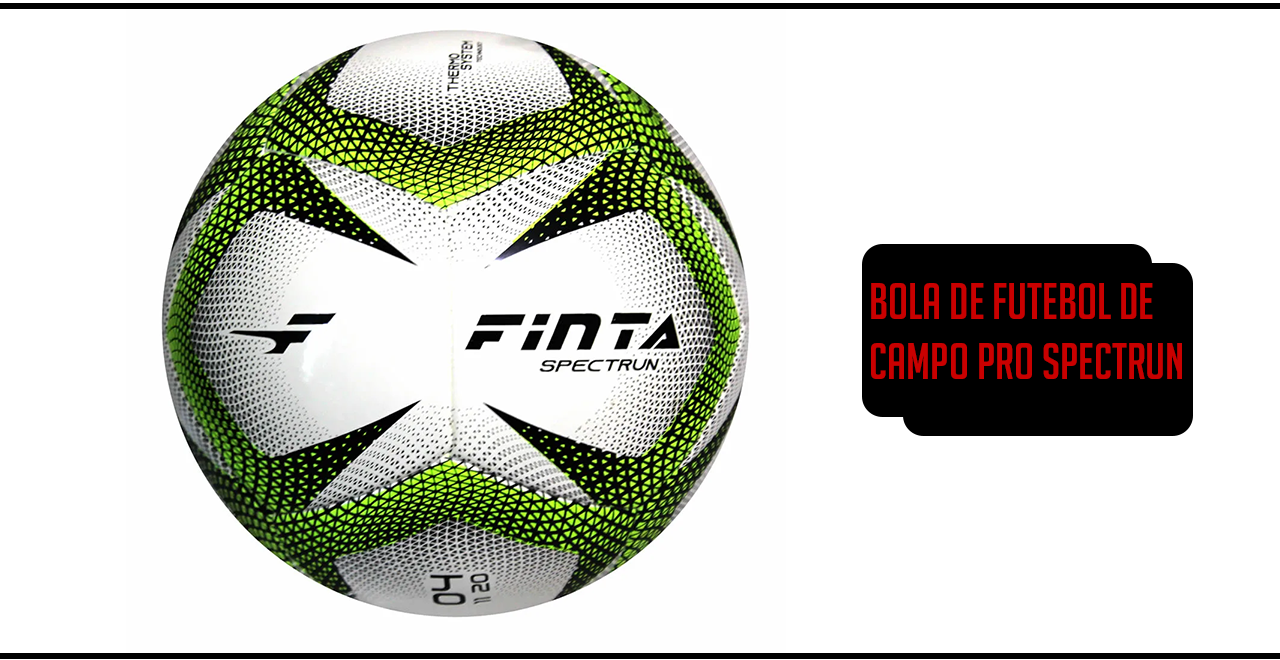
<style>
.page{position:relative;width:1280px;height:660px;background:#ffffff}
.page>*{position:absolute;margin:0}
.t1{font:50px "BigNoodleTitling";color:#c90000}
</style>
<div class="page">
<p class="t1" style="left:871px;top:283px;width:311px;height:96px">Bola de Futebol de Campo Pro Spectrun - 12 Gomos</p>
</div>
